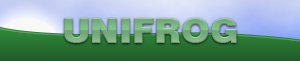
<style>
.page{position:relative;width:300px;height:61px}
.page>*{position:absolute;margin:0}
.t1{font:50px "Swiss721BT-Black";color:#79b17f;font-variant:small-caps}
</style>
<div class="page">
<p class="t1" style="left:64px;top:18px;width:173px;height:25px">unifrog</p>
</div>
